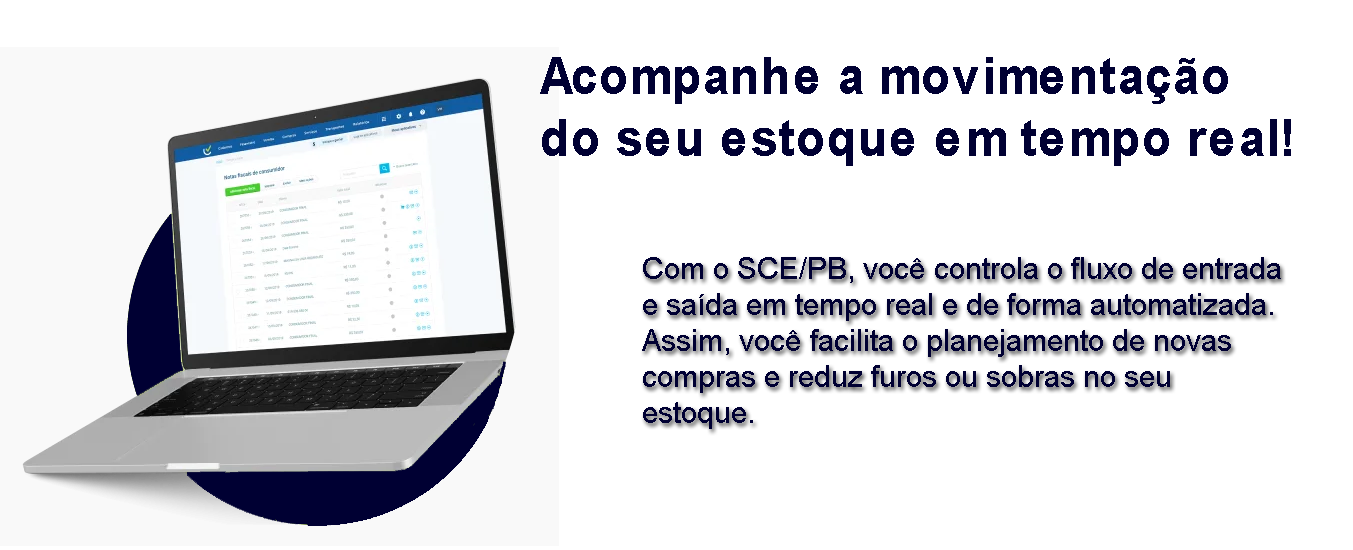
<style>
.page{position:relative;width:1353px;height:550px;background:#ffffff}
.page>*{position:absolute;margin:0}
.t1{font:52px "Arial-BoldMT";color:#000033;scale:0.93 1}
.t2{font:30px "ArialMT";color:#000033}
</style>
<div class="page">
<p class="t1" style="left:540px;top:57px;width:751px;height:109px">Acompanhe a movimentação <br>do seu estoque em tempo real!</p>
<p class="t2" style="left:642px;top:257px;width:639px;height:172px">Com o SCE/PB, você controla o fluxo de entrada<br>e saída em tempo real e de forma automatizada.<br>Assim, você facilita o planejamento de novas <br>compras e reduz furos ou sobras no seu <br>estoque.</p>
</div>
